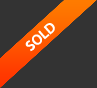
<style>
.page{position:relative;width:97px;height:88px;background:#333333}
.page>*{position:absolute;margin:0}
.t1{font:14.7px "MyriadPro-Semibold";color:#ffffff;text-transform:uppercase}
</style>
<div class="page">
<p class="t1" style="left:25px;top:23px;width:30px;height:29px;rotate:-42deg">SOLD</p>
</div>
